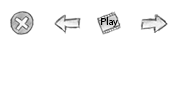
<style>
.page{position:relative;width:176px;height:88px;background:#ffffff}
.page>*{position:absolute;margin:0}
.t1{font:10px "MyriadPro-Regular";color:#000000}
</style>
<div class="page">
<p class="t1" style="left:101px;top:17px;width:17px;height:11px">Play</p>
</div>
